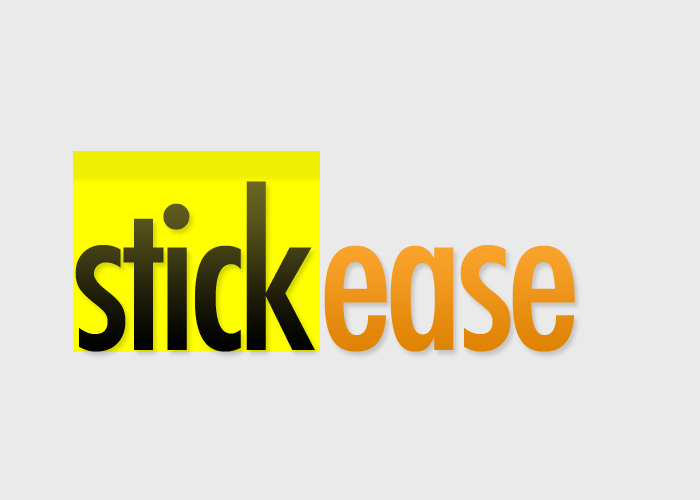
<style>
.page{position:relative;width:700px;height:500px;background:#eaeaea}
.page>*{position:absolute;margin:0}
.t1{font:203px "Futura-CondensedMedium";letter-spacing:-0.045em}
.t2{font:203px "Futura-CondensedMedium";letter-spacing:-0.045em;color:#f9a32c}
</style>
<div class="page">
<p class="t1" style="left:75px;top:181px;width:240px;height:171px">stick</p>
<p class="t2" style="left:324px;top:245px;width:251px;height:107px">ease</p>
</div>
